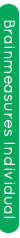
<style>
.page{position:relative;width:20px;height:238px;background:#00a65a}
.page>*{position:absolute;margin:0}
.t1{font:16px "Quicksand-Regular";color:#ffffff}
</style>
<div class="page">
<p class="t1" style="left:4px;top:20px;width:11px;height:198px;rotate:90deg">Brainmeasures Individual</p>
</div>
